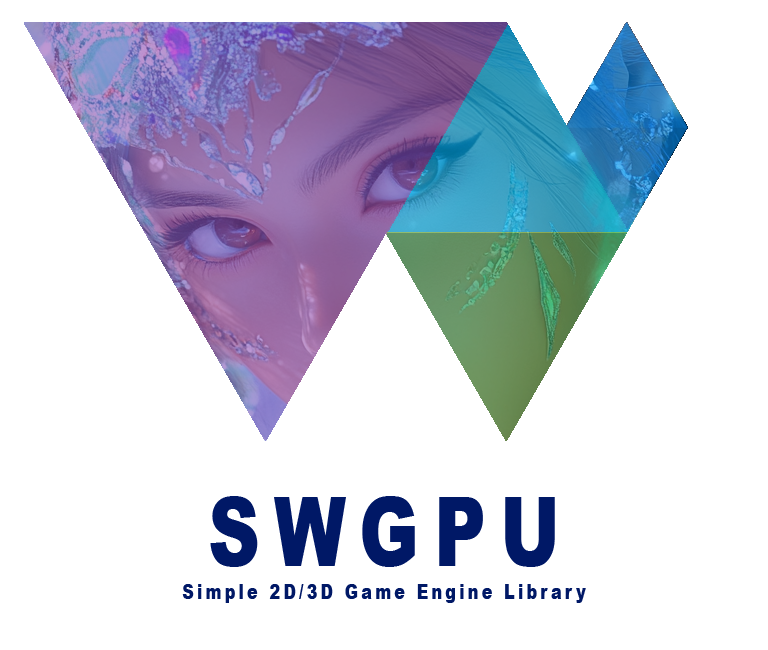
<style>
.page{position:relative;width:768px;height:650px;background:#ffffff}
.page>*{position:absolute;margin:0}
.t1{font:96px "Arial-Black";letter-spacing:0.2em;color:#001866;scale:0.75 1}
.t2{font:21.3px "Arial-Black";letter-spacing:0.2em;color:#001866;scale:0.75 1}
</style>
<div class="page">
<p class="t1" style="left:210px;top:496px;width:345px;height:71px">SWGPU</p>
<p class="t2" style="left:182px;top:584px;width:404px;height:19px">Simple 2D/3D Game Engine Library</p>
</div>
